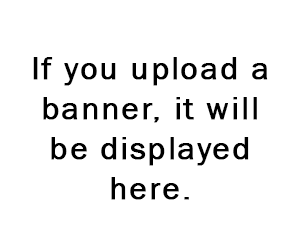
<style>
.page{position:relative;width:300px;height:250px;background:#ffffff}
.page>*{position:absolute;margin:0}
.t1{font:33.3px "FranklinGothic-Book";letter-spacing:0.04em;color:#000000;font-weight:bold}
</style>
<div class="page">
<p class="t1" style="left:33px;top:57px;width:235px;height:143px;text-align:center">If you upload a<br>banner, it will<br>be displayed<br>here.</p>
</div>
